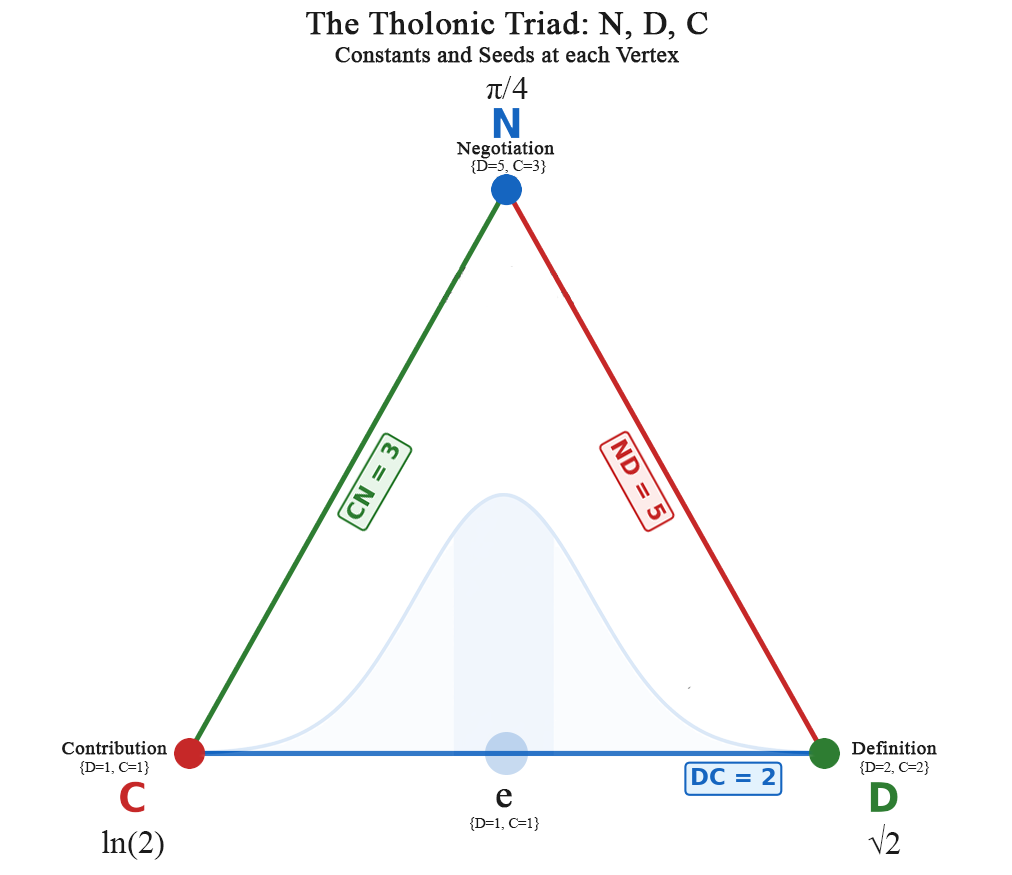
<style>
.page{position:relative;width:1012px;height:875px;background:#ffffff}
.page>*{position:absolute;margin:0}
.t1{font:22.9px "TimesNewRomanPSMT";color:#1b1b1b;font-weight:bold}
.t2{font:33.3px "TimesNewRomanPSMT";color:#1b1b1b;font-weight:bold}
.t3{font:33.3px "TimesNewRomanPSMT";color:#1b1b1b}
.t4{font:33.3px/14.6px "TimesNewRomanPSMT";color:#1b1b1b;font-weight:bold}
.t5{font:27.1px/14.6px "TimesNewRomanPSMT";color:#1b1b1b}
.t6{font:25px/14.6px "TimesNewRomanPSMT";color:#1b1b1b}
.t7{font:25px/8.3px "TimesNewRomanPSMT";color:#1b1b1b}
.t8{font:64.6px/8.3px "TimesNewRomanPSMT";color:#1b1b1b;font-weight:bold}
</style>
<div class="page">
<p class="t1" style="left:306px;top:11px;width:402px;height:52px;text-align:center"><span class="t2">The Tholonic Triad: N, D, C<br></span>Constants and Seeds at each Vertex</p>
<p class="t3" style="left:486px;top:76px;width:42px;height:23px">π/4</p>
<p class="t4" style="left:456px;top:141px;width:99px;height:33px;text-align:center">Negotiation <br><span class="t5">{D=5, C=3}</span></p>
<p class="t4" style="left:62px;top:741px;width:105px;height:34px;text-align:center">Contribution<br><span class="t6">{D=1, C=1}</span></p>
<p class="t4" style="left:852px;top:741px;width:85px;height:34px;text-align:center">Definition<br><span class="t6">{D=2, C=2}</span></p>
<p class="t7" style="left:470px;top:789px;width:69px;height:42px;text-align:center"><span class="t8">e<br></span>{D=1, C=1}</p>
<p class="t3" style="left:102px;top:830px;width:62px;height:30px">ln(2)</p>
<p class="t3" style="left:868px;top:824px;width:33px;height:31px">√2</p>
</div>
